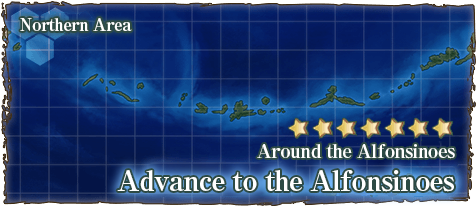
<style>
.page{position:relative;width:476px;height:206px}
.page>*{position:absolute;margin:0}
.t1{font:17px "RyuminPro-ExBold";letter-spacing:-0.04em;color:#ffffff}
.t2{font:19px "RyuminPro-ExBold";letter-spacing:-0.04em;color:#ffffff}
.t3{font:28px "RyuminPro-ExBold";letter-spacing:-0.04em;color:#ffffff}
</style>
<div class="page">
<p class="t1" style="left:20px;top:18px;width:112px;height:13px">Northern Area</p>
<p class="t2" style="left:257px;top:144px;width:198px;height:15px">Around the Alfonsinoes</p>
<p class="t3" style="left:117px;top:170px;width:337px;height:22px">Advance to the Alfonsinoes</p>
</div>
